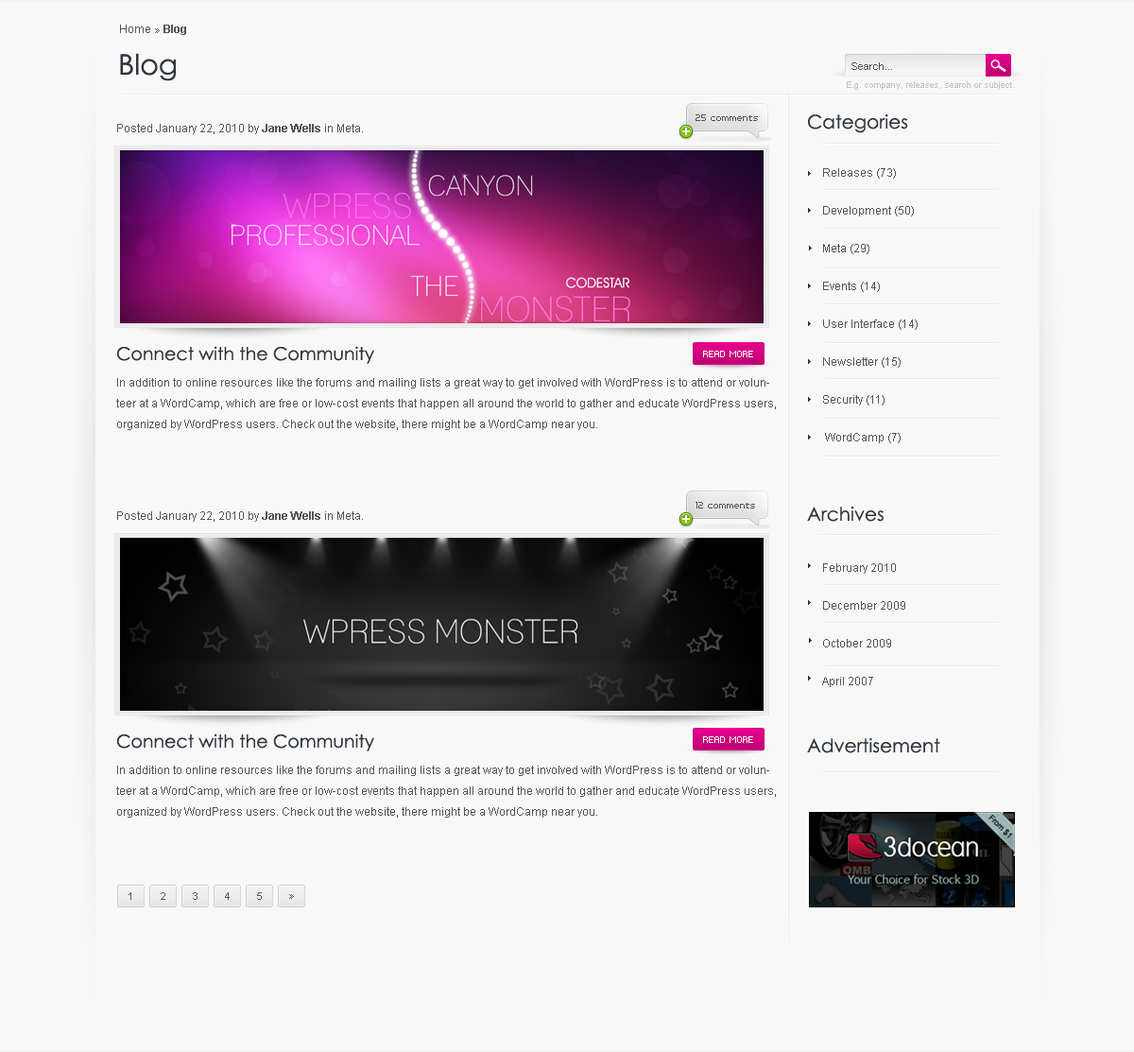
<style>
.page{position:relative;width:1134px;height:1052px;background:#f8f8f8}
.page>*{position:absolute;margin:0}
.t1{font:11.3px "ArialMT";color:#555555}
.t2{font:11.3px "Arial-BoldMT";color:#555555}
.t3{font:28.3px "CenturyGothic";color:#2e353e}
.t4{font:10.4px "ArialMT";color:#555555}
.t5{font:8.5px "ArialMT";color:#c2c2c2}
.t6{font:7.6px "PFTempestaSeven";color:#555555}
.t7{font:18.9px "CenturyGothic";color:#2e353e}
.t8{font:11.3px/37.8px "ArialMT";color:#555555}
.t9{font:18px "CenturyGothic";color:#2e353e}
.t10{font:7.6px "PFTempestaSeven";color:#ffffff}
.t11{font:11.3px/20.8px "ArialMT";color:#555555}
</style>
<div class="page">
<p class="t1" style="left:120px;top:25px;width:66px;height:10px">Home » <span class="t2">Blog</span></p>
<p class="t3" style="left:120px;top:53px;width:56px;height:28px">Blog</p>
<p class="t4" style="left:851px;top:62px;width:41px;height:8px">Search...</p>
<p class="t5" style="left:847px;top:81px;width:168px;height:9px">E.g. company, releases, search or subject.</p>
<p class="t1" style="left:117px;top:124px;width:246px;height:10px">Posted January 22, 2010 by <span class="t2">Jane Wells</span> in Meta.</p>
<p class="t6" style="left:695px;top:114px;width:63px;height:7px">25 comments</p>
<p class="t7" style="left:808px;top:114px;width:100px;height:19px">Categories</p>
<p class="t8" style="left:823px;top:168px;width:94px;height:275px">Releases (73)<br>Development (50)<br>Meta (29)<br>Events (14)<br>User Interface (14)<br>Newsletter (15)<br>Security (11)<br> WordCamp (7)</p>
<p class="t9" style="left:117px;top:346px;width:257px;height:18px">Connect with the Community</p>
<p class="t10" style="left:703px;top:351px;width:50px;height:6px">READ MORE</p>
<p class="t11" style="left:116px;top:378px;width:660px;height:52px">In addition to online resources like the forums and mailing lists a great way to get involved with WordPress is to attend or volunteer at a WordCamp, which are free or low-cost events that happen all around the world to gather and educate WordPress users, organized by WordPress users. Check out the website, there might be a WordCamp near you.</p>
<p class="t6" style="left:695px;top:502px;width:60px;height:6px">12 comments</p>
<p class="t7" style="left:807px;top:506px;width:76px;height:16px">Archives</p>
<p class="t1" style="left:117px;top:511px;width:246px;height:11px">Posted January 22, 2010 by <span class="t2">Jane Wells</span> in Meta.</p>
<p class="t8" style="left:822px;top:563px;width:83px;height:124px">February 2010<br>December 2009<br>October 2009<br>April 2007</p>
<p class="t9" style="left:117px;top:733px;width:257px;height:18px">Connect with the Community</p>
<p class="t10" style="left:703px;top:736px;width:50px;height:7px">READ MORE</p>
<p class="t7" style="left:807px;top:738px;width:133px;height:15px">Advertisement</p>
<p class="t11" style="left:116px;top:765px;width:660px;height:52px">In addition to online resources like the forums and mailing lists a great way to get involved with WordPress is to attend or volunteer at a WordCamp, which are free or low-cost events that happen all around the world to gather and educate WordPress users, organized by WordPress users. Check out the website, there might be a WordCamp near you.</p>
<p class="t4" style="left:129px;top:892px;width:2px;height:8px">1</p>
<p class="t4" style="left:161px;top:892px;width:4px;height:8px">2</p>
<p class="t4" style="left:193px;top:892px;width:4px;height:8px">3</p>
<p class="t4" style="left:225px;top:892px;width:5px;height:8px">4</p>
<p class="t4" style="left:257px;top:892px;width:5px;height:8px">5</p>
<p class="t4" style="left:289px;top:894px;width:5px;height:5px">»</p>
</div>
